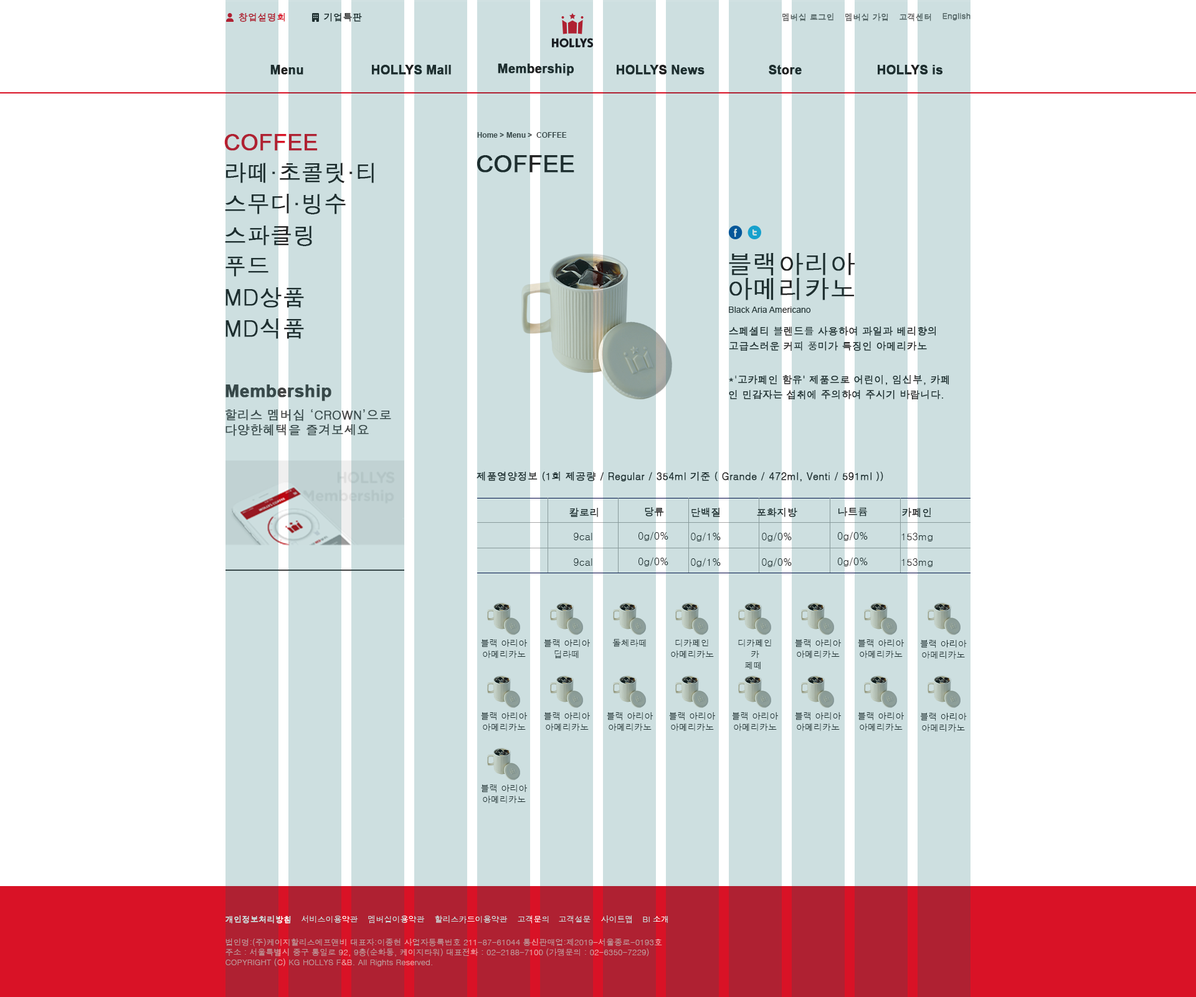
<style>
.page{position:relative;width:1196px;height:997px;background:#ffffff}
.page>*{position:absolute;margin:0}
.t1{font:9.3px "Dotum";color:#af2132;font-weight:bold}
.t2{font:9.3px "Dotum";color:#222222;font-weight:bold}
.t3{font:8.1px "Dotum";color:#666666;font-weight:bold}
.t4{font:12.5px "Arial-BoldMT";color:#222222;font-weight:bold}
.t5{font:22.4px "ArialMT";color:#af2132;font-weight:bold}
.t6{font:7.5px "Arial-BoldMT";color:#444444}
.t7{font:23.7px "ArialMT";color:#222222;font-weight:bold}
.t8{font:22.4px "Dotum";color:#222222;font-weight:bold}
.t9{font:24.9px/24.9px "Dotum";color:#222222;font-weight:bold}
.t10{font:8.7px "ArialMT";color:#222222}
.t11{font:10px/15px "Dotum";color:#222222;font-weight:bold}
.t12{font:17.4px "Arial-BoldMT";color:#444444;font-weight:bold}
.t13{font:12.5px "Dotum";color:#444444;font-weight:bold}
.t14{font:10px "Dotum";color:#222222;font-weight:bold}
.t15{font:10px "Dotum";color:#222222}
.t16{font:8.7px/11.2px "Dotum";color:#222222}
.t17{font:8.7px "Dotum";color:#1d2e2f}
.t18{font:8.8px/11.3px "Dotum";color:#222222}
.t19{font:8.1px "Dotum";color:#cddfe0;font-weight:bold}
.t20{font:8.1px "Dotum";color:#cddfe0}
.t21{font:8.1px "Dotum"}
.t22{font:8.1px "Dotum";color:#bf999c}
</style>
<div class="page">
<p class="t1" style="left:239px;top:13px;width:46px;height:9px">창업설명회</p>
<p class="t2" style="left:324px;top:13px;width:38px;height:9px">기업특판</p>
<p class="t3" style="left:783px;top:13px;width:51px;height:8px">멤버십 로그인</p>
<p class="t3" style="left:845px;top:13px;width:43px;height:8px">멤버십 가입</p>
<p class="t3" style="left:900px;top:13px;width:31px;height:8px">고객센터</p>
<p class="t3" style="left:943px;top:13px;width:28px;height:8px">English</p>
<p class="t4" style="left:270px;top:65px;width:33px;height:10px">Menu</p>
<p class="t4" style="left:372px;top:65px;width:79px;height:10px">HOLLYS Mall</p>
<p class="t4" style="left:498px;top:64px;width:76px;height:12px">Membership</p>
<p class="t4" style="left:617px;top:65px;width:88px;height:10px">HOLLYS News</p>
<p class="t4" style="left:769px;top:65px;width:33px;height:10px">Store</p>
<p class="t4" style="left:878px;top:65px;width:65px;height:10px">HOLLYS is</p>
<p class="t5" style="left:224px;top:134px;width:94px;height:17px">COFFEE</p>
<p class="t6" style="left:477px;top:132px;width:90px;height:6px">Home &gt; Menu &gt;  COFFEE</p>
<p class="t7" style="left:477px;top:155px;width:97px;height:18px">COFFEE</p>
<p class="t8" style="left:226px;top:163px;width:148px;height:20px">라떼·초콜릿·티</p>
<p class="t8" style="left:225px;top:194px;width:121px;height:20px">스무디·빙수</p>
<p class="t8" style="left:225px;top:226px;width:87px;height:20px">스파클링</p>
<p class="t8" style="left:226px;top:257px;width:43px;height:20px">푸드</p>
<p class="t9" style="left:729px;top:253px;width:126px;height:47px">블랙아리아<br>아메리카노</p>
<p class="t8" style="left:226px;top:287px;width:78px;height:21px">MD상품</p>
<p class="t10" style="left:729px;top:307px;width:82px;height:6px">Black Aria Americano</p>
<p class="t8" style="left:226px;top:318px;width:78px;height:21px">MD식품</p>
<p class="t11" style="left:729px;top:326px;width:207px;height:25px">스페셜티 블렌드를 사용하여 과일과 베리향의<br>고급스러운 커피 풍미가 특징인 아메리카노</p>
<p class="t11" style="left:729px;top:375px;width:220px;height:24px">*'고카페인 함유' 제품으로 어린이, 임신부, 카페<br>인 민감자는 섭취에 주의하여 주시기 바랍니다.</p>
<p class="t12" style="left:226px;top:384px;width:105px;height:17px">Membership</p>
<p class="t13" style="left:225px;top:409px;width:166px;height:27px">할리스 멤버십 ‘CROWN’으로<br>다양한혜택을 즐겨보세요</p>
<p class="t14" style="left:477px;top:471px;width:406px;height:11px">제품영양정보 (1회 제공량 / Regular / 354ml 기준 ( Grande / 472ml, Venti / 591ml ))</p>
<p class="t14" style="left:569px;top:508px;width:29px;height:9px">칼로리</p>
<p class="t14" style="left:645px;top:507px;width:19px;height:9px">당류</p>
<p class="t14" style="left:692px;top:508px;width:28px;height:9px">단백질</p>
<p class="t14" style="left:757px;top:508px;width:40px;height:9px">포화지방</p>
<p class="t14" style="left:838px;top:507px;width:29px;height:9px">나트륨</p>
<p class="t14" style="left:902px;top:508px;width:29px;height:9px">카페인</p>
<p class="t15" style="left:574px;top:533px;width:18px;height:7px">9cal</p>
<p class="t15" style="left:639px;top:531px;width:30px;height:10px">0g/0%</p>
<p class="t15" style="left:691px;top:532px;width:30px;height:9px">0g/1%</p>
<p class="t15" style="left:762px;top:532px;width:30px;height:9px">0g/0%</p>
<p class="t15" style="left:838px;top:531px;width:30px;height:10px">0g/0%</p>
<p class="t15" style="left:902px;top:533px;width:31px;height:8px">153mg</p>
<p class="t15" style="left:639px;top:557px;width:30px;height:9px">0g/0%</p>
<p class="t15" style="left:691px;top:558px;width:30px;height:9px">0g/1%</p>
<p class="t15" style="left:762px;top:558px;width:30px;height:9px">0g/0%</p>
<p class="t15" style="left:838px;top:557px;width:30px;height:9px">0g/0%</p>
<p class="t15" style="left:574px;top:558px;width:18px;height:8px">9cal</p>
<p class="t15" style="left:902px;top:558px;width:31px;height:9px">153mg</p>
<p class="t16" style="left:481px;top:639px;width:46px;height:19px;text-align:center">블랙 아리아<br>아메리카노</p>
<p class="t16" style="left:544px;top:639px;width:46px;height:20px;text-align:center">블랙 아리아<br>딥라떼</p>
<p class="t17" style="left:612px;top:639px;width:34px;height:8px">돌체라떼</p>
<p class="t16" style="left:671px;top:639px;width:43px;height:19px;text-align:center">디카페인<br>아메리카노</p>
<p class="t16" style="left:738px;top:639px;width:33px;height:30px;text-align:center">디카페인<br>카<br>페떼</p>
<p class="t16" style="left:795px;top:639px;width:46px;height:19px;text-align:center">블랙 아리아<br>아메리카노</p>
<p class="t16" style="left:858px;top:639px;width:46px;height:19px;text-align:center">블랙 아리아<br>아메리카노</p>
<p class="t18" style="left:920px;top:639px;width:47px;height:20px;text-align:center">블랙 아리아<br>아메리카노</p>
<p class="t16" style="left:481px;top:712px;width:46px;height:19px;text-align:center">블랙 아리아<br>아메리카노</p>
<p class="t16" style="left:544px;top:712px;width:46px;height:19px;text-align:center">블랙 아리아<br>아메리카노</p>
<p class="t16" style="left:607px;top:712px;width:46px;height:19px;text-align:center">블랙 아리아<br>아메리카노</p>
<p class="t16" style="left:669px;top:712px;width:46px;height:19px;text-align:center">블랙 아리아<br>아메리카노</p>
<p class="t16" style="left:732px;top:712px;width:46px;height:19px;text-align:center">블랙 아리아<br>아메리카노</p>
<p class="t16" style="left:795px;top:712px;width:46px;height:19px;text-align:center">블랙 아리아<br>아메리카노</p>
<p class="t16" style="left:858px;top:712px;width:46px;height:19px;text-align:center">블랙 아리아<br>아메리카노</p>
<p class="t18" style="left:920px;top:712px;width:47px;height:20px;text-align:center">블랙 아리아<br>아메리카노</p>
<p class="t16" style="left:481px;top:784px;width:46px;height:19px;text-align:center">블랙 아리아<br>아메리카노</p>
<p class="t19" style="left:226px;top:915px;width:65px;height:8px">개인정보처리방침</p>
<p class="t20" style="left:302px;top:915px;width:56px;height:8px">서비스이용약관</p>
<p class="t20" style="left:368px;top:915px;width:57px;height:8px">멤버십이용약관</p>
<p class="t20" style="left:435px;top:915px;width:73px;height:8px">할리스카드이용약관</p>
<p class="t21" style="left:518px;top:915px;width:31px;height:8px">고객문의</p>
<p class="t20" style="left:559px;top:915px;width:32px;height:8px">고객설문</p>
<p class="t20" style="left:601px;top:915px;width:31px;height:8px">사이트맵</p>
<p class="t21" style="left:643px;top:916px;width:25px;height:7px">BI 소개</p>
<p class="t22" style="left:226px;top:938px;width:436px;height:28px">법인명:(주)케이지할리스에프앤비 대표자:이종현 사업자등록번호 211-87-61044 통신판매업:제2019-서울종로-0193호<br>주소 : 서울특별시 중구 통일로 92, 9층(순화동, 케이지타워) 대표전화 : 02-2188-7100 (가맹문의 : 02-6350-7229)<br>COPYRIGHT (C) KG HOLLYS F&amp;B. All Rights Reserved.</p>
</div>
